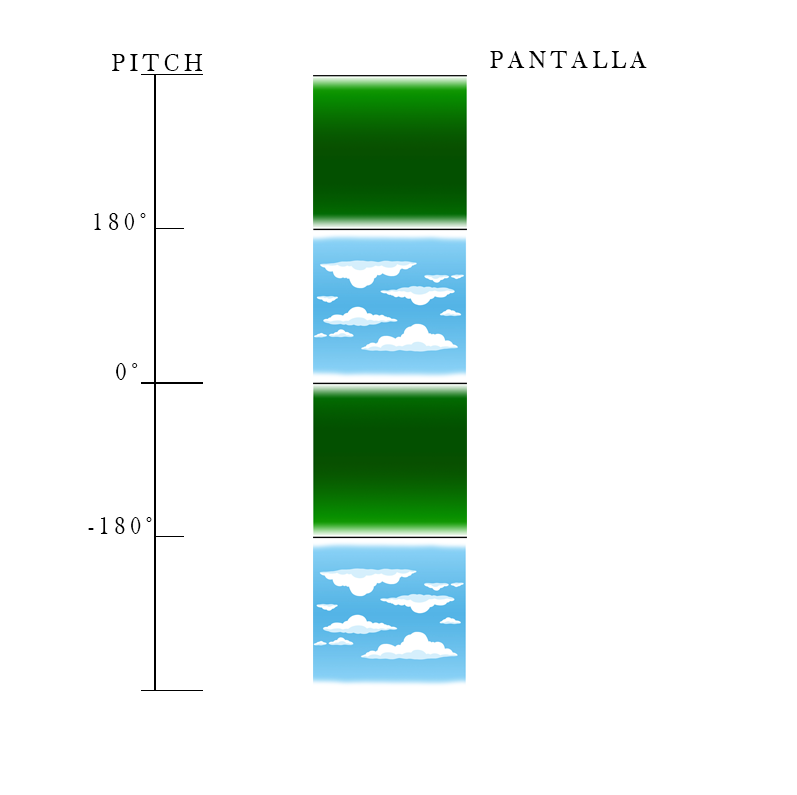
<style>
.page{position:relative;width:797px;height:795px;background:#ffffff}
.page>*{position:absolute;margin:0}
.t1{font:24.6px "BaskOldFace";letter-spacing:0.22em;color:#000000;scale:0.93 1}
.t2{font:24.6px "BaskOldFace";letter-spacing:0.22em;color:#000000;scale:0.91 1}
.t3{font:24.6px "BaskOldFace";letter-spacing:0.22em;color:#000000;scale:0.92 1}
.t4{font:24.6px "BaskOldFace";letter-spacing:0.22em;color:#000000;scale:0.9 1}
</style>
<div class="page">
<p class="t1" style="left:112px;top:54px;width:91px;height:17px">PITCH</p>
<p class="t1" style="left:490px;top:51px;width:157px;height:17px">PANTALLA</p>
<p class="t2" style="left:94px;top:213px;width:52px;height:17px">180°</p>
<p class="t3" style="left:116px;top:363px;width:22px;height:17px">0°</p>
<p class="t4" style="left:88px;top:517px;width:64px;height:17px">-180°</p>
</div>
